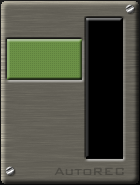
<style>
.page{position:relative;width:140px;height:185px}
.page>*{position:absolute;margin:0}
.t1{font:14px "BankGothicBT-Medium";color:#4d4b44}
</style>
<div class="page">
<p class="t1" style="left:54px;top:167px;width:70px;height:8px">AutoREC</p>
</div>
